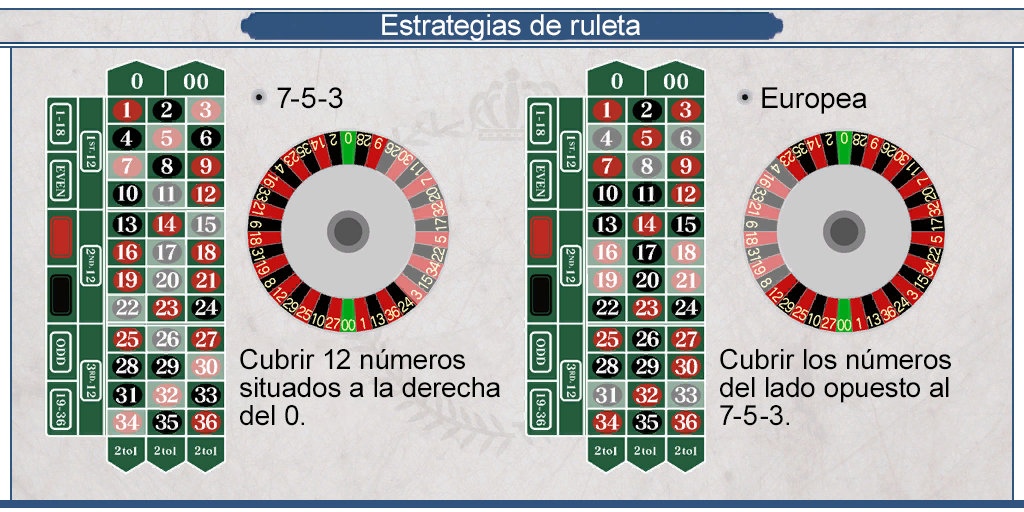
<style>
.page{position:relative;width:1024px;height:512px}
.page>*{position:absolute;margin:0}
.t1{font:29px "ArialMT";color:#fefefe}
.t2{font:29px "ArialMT";color:#000000}
.t3{font:28px/28px "ArialMT";color:#000000}
</style>
<div class="page">
<p class="t1" style="left:382px;top:14px;width:258px;height:27px">Estrategias de ruleta</p>
<p class="t2" style="left:277px;top:87px;width:66px;height:22px">7-5-3</p>
<p class="t2" style="left:762px;top:87px;width:105px;height:27px">Europea</p>
<p class="t3" style="left:240px;top:348px;width:260px;height:78px">Cubrir 12 números<br>situados a la derecha<br>del 0.</p>
<p class="t3" style="left:720px;top:348px;width:231px;height:78px">Cubrir los números <br>del lado opuesto al <br>7-5-3.</p>
</div>
